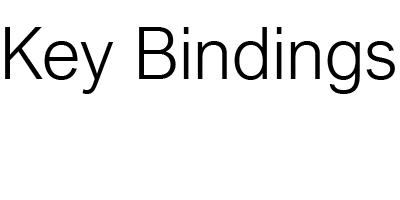
<style>
.page{position:relative;width:400px;height:200px;background:#ffffff}
.page>*{position:absolute;margin:0}
.t1{font:72px "ArialNova-Light";color:#000000}
</style>
<div class="page">
<p class="t1" style="left:5px;top:27px;width:390px;height:67px">Key Bindings</p>
</div>
